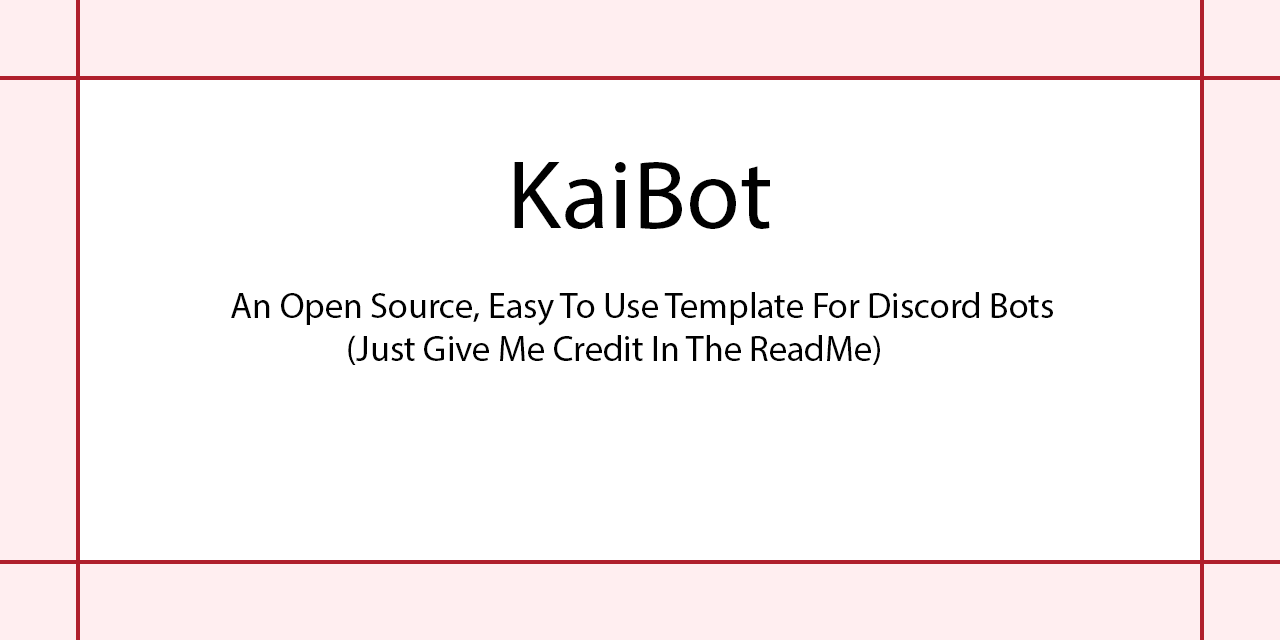
<style>
.page{position:relative;width:1280px;height:640px;background:#ffffff}
.page>*{position:absolute;margin:0}
.t1{font:98.5px "MyriadPro-Regular";color:#000000}
.t2{font:36px "MyriadPro-Regular";color:#000000}
</style>
<div class="page">
<p class="t1" style="left:514px;top:162px;width:256px;height:67px">KaiBot</p>
<p class="t2" style="left:231px;top:292px;width:822px;height:73px">An Open Source, Easy To Use Template For Discord Bots<br>    (Just Give Me Credit In The ReadMe)</p>
</div>
